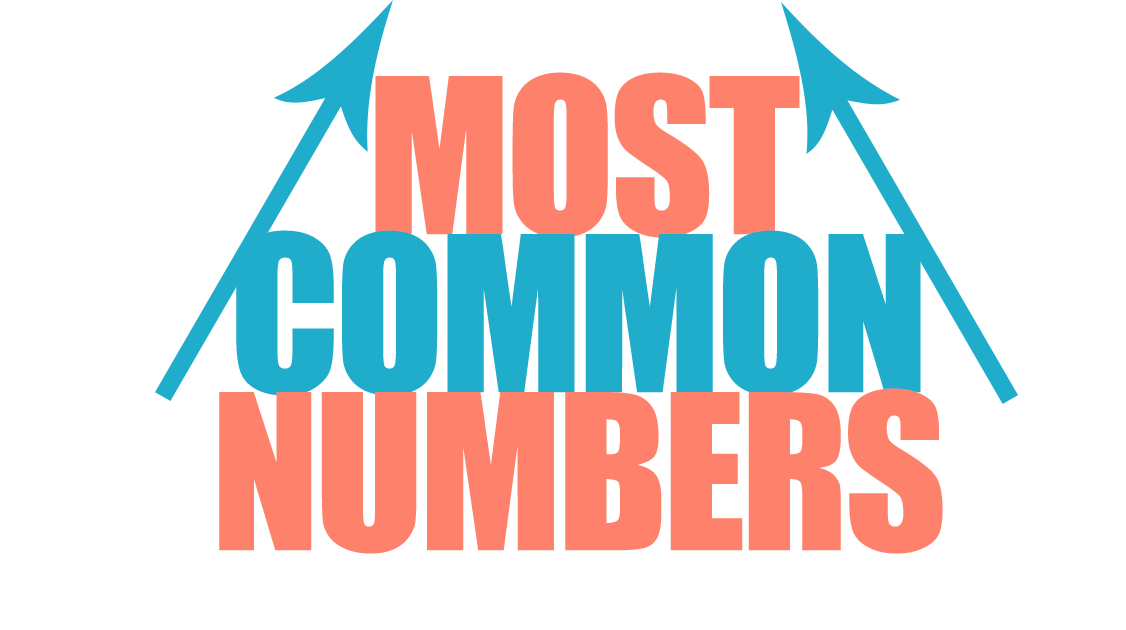
<style>
.page{position:relative;width:1126px;height:630px;background:#ffffff}
.page>*{position:absolute;margin:0}
.t1{font:200px "Impact";letter-spacing:-0.025em;color:#fe816c}
.t2{font:200px "Impact";letter-spacing:-0.025em;color:#1fadcb}
</style>
<div class="page">
<p class="t1" style="left:375px;top:72px;width:425px;height:166px">MOST</p>
<p class="t2" style="left:236px;top:230px;width:685px;height:166px">COMMON</p>
<p class="t1" style="left:219px;top:388px;width:724px;height:166px">NUMBERS</p>
</div>
